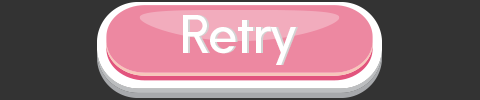
<style>
.page{position:relative;width:480px;height:100px;background:#333333}
.page>*{position:absolute;margin:0}
.t1{font:50.6px "HKExplorerSharp-Regular";letter-spacing:-0.035em;color:#ffffff}
</style>
<div class="page">
<p class="t1" style="left:183px;top:15px;width:113px;height:50px">Retry</p>
<p class="t1" style="left:185px;top:15px;width:113px;height:50px">Retry</p>
</div>
